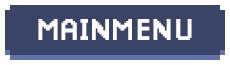
<style>
.page{position:relative;width:230px;height:65px;background:#3a4466}
.page>*{position:absolute;margin:0}
.t1{font:30.6px "Pixellari";color:#ffffff}
</style>
<div class="page">
<p class="t1" style="left:38px;top:19px;width:154px;height:21px">MAINMENU</p>
</div>
